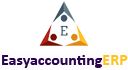
<style>
.page{position:relative;width:128px;height:70px;background:#ffffff}
.page>*{position:absolute;margin:0}
.t1{font:16px "Calibri-Bold";color:#2b044d}
.t2{font:16px "Calibri-Bold";color:#ffc320}
</style>
<div class="page">
<p class="t1" style="left:2px;top:55px;width:126px;height:13px">Easyaccounting<span class="t2">ERP</span></p>
</div>
